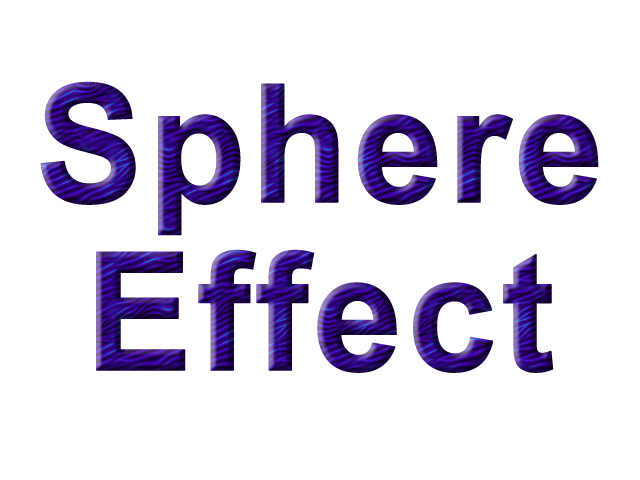
<style>
.page{position:relative;width:640px;height:480px;background:#ffffff}
.page>*{position:absolute;margin:0}
.t1{font:164.2px/168px "Arial-BoldMT";font-weight:bold}
</style>
<div class="page">
<p class="t1" style="left:40px;top:81px;width:559px;height:292px;text-align:center">Sphere<br>Effect</p>
</div>
